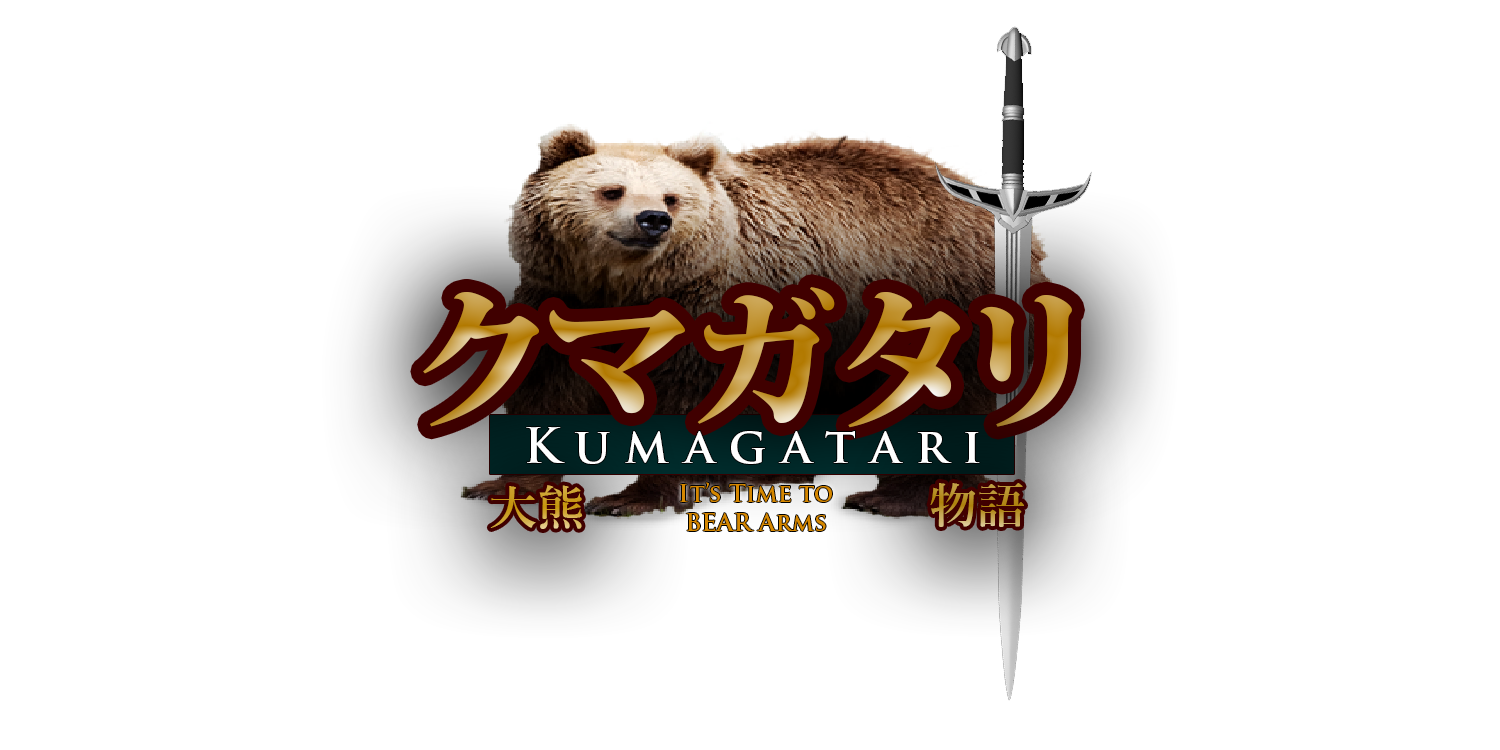
<style>
.page{position:relative;width:1500px;height:750px;background:#ffffff}
.page>*{position:absolute;margin:0}
.t1{font:155px "KozMinPr6N-Heavy"}
.t2{font:48px "TrajanPro-Bold";color:#ffffff}
.t3{font:48px "YuMincho-Demibold"}
.t4{font:24px "TrajanPro-Bold";color:#d58700}
</style>
<div class="page">
<p class="t1" style="left:423px;top:287px;width:649px;height:141px">クマガタリ</p>
<p class="t2" style="left:526px;top:427px;width:454px;height:37px">K u m a g a t a r i</p>
<p class="t3" style="left:490px;top:485px;width:93px;height:44px">大熊</p>
<p class="t4" style="left:680px;top:482px;width:152px;height:49px;text-align:center">It’s Time to<br>BEAR Arms</p>
<p class="t3" style="left:930px;top:483px;width:94px;height:44px">物語</p>
</div>
